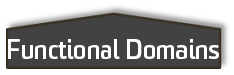
<style>
.page{position:relative;width:234px;height:75px;background:#424242}
.page>*{position:absolute;margin:0}
.t1{font:26.8px "SommetBold";color:#ffffff}
</style>
<div class="page">
<p class="t1" style="left:8px;top:39px;width:211px;height:20px">Functional Domains</p>
</div>
